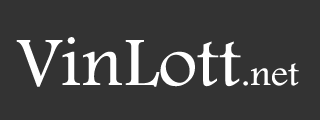
<style>
.page{position:relative;width:320px;height:120px;background:#333333}
.page>*{position:absolute;margin:0}
.t1{font:72px "FootlightMTLight";color:#ffffff;scale:1.06 1}
.t2{font:36px "FootlightMTLight";color:#ffffff;scale:1.06 1}
</style>
<div class="page">
<p class="t1" style="left:16px;top:37px;width:283px;height:50px">VinLott<span class="t2">.net</span></p>
</div>
